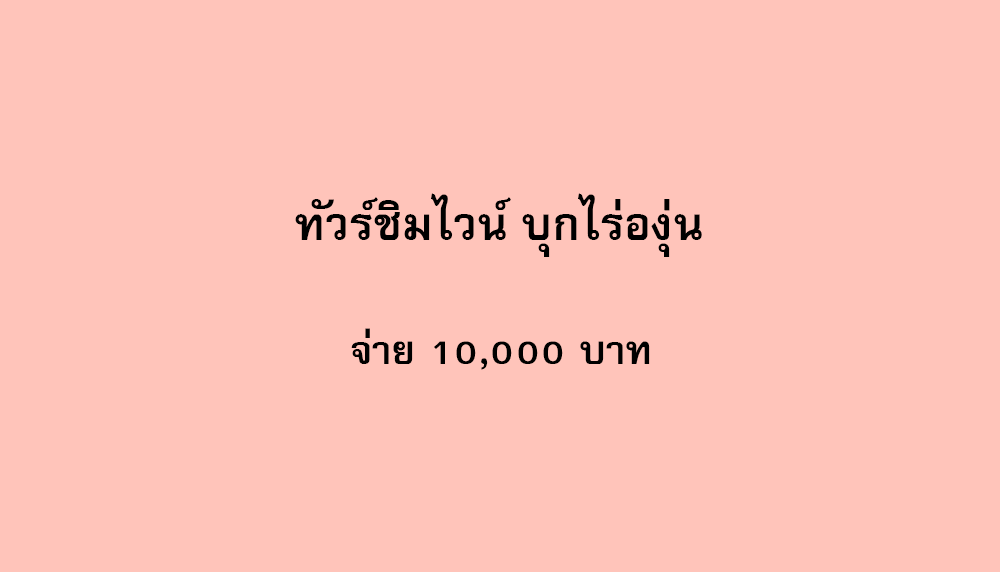
<style>
.page{position:relative;width:1000px;height:572px;background:#ffc4ba}
.page>*{position:absolute;margin:0}
.t1{font:64px "FreesiaUPCBold";color:#000000}
.t2{font:56px "FreesiaUPCBold";color:#000000}
</style>
<div class="page">
<p class="t1" style="left:295px;top:193px;width:407px;height:64px">ทัวร์ชิมไวน์ บุกไร่องุ่น</p>
<p class="t2" style="left:351px;top:328px;width:299px;height:42px">จ่าย 10,000 บาท</p>
</div>
